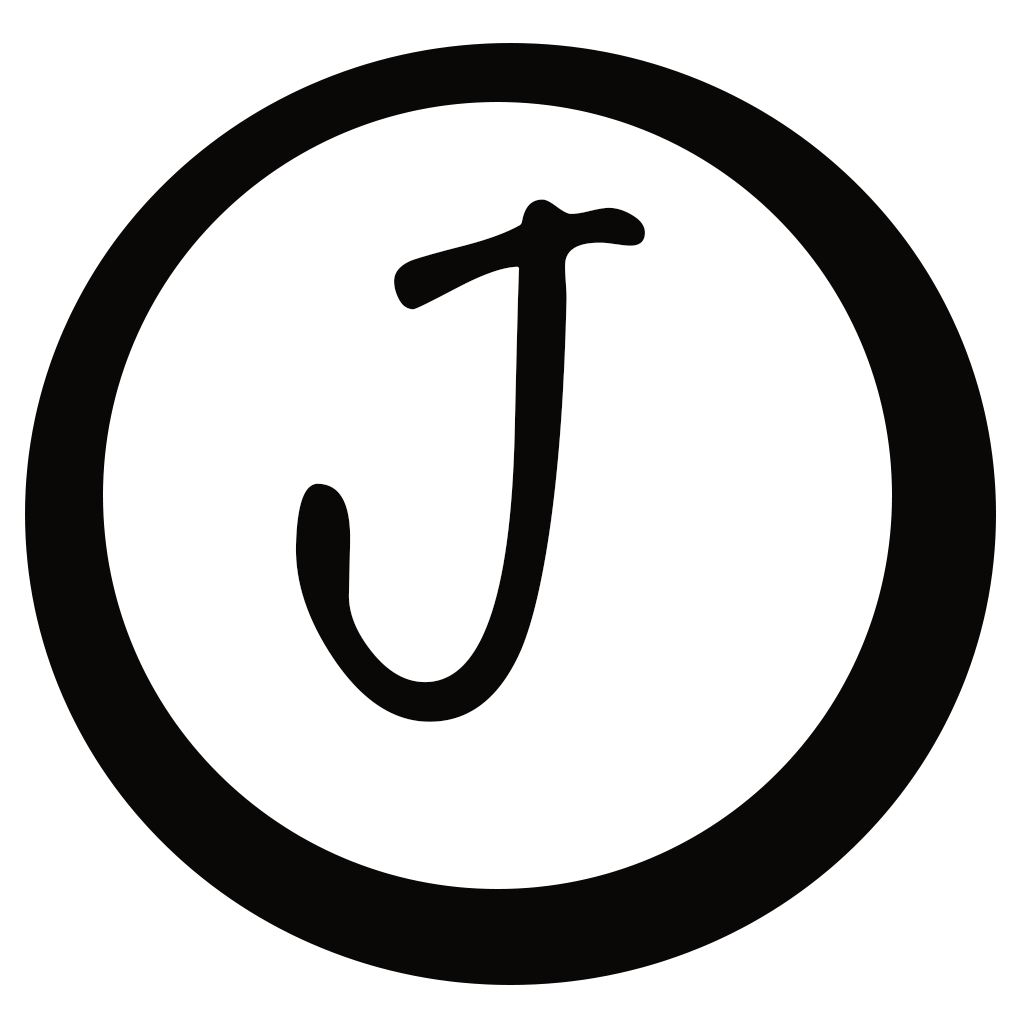
<style>
.page{position:relative;width:1024px;height:1024px;background:#ffffff}
.page>*{position:absolute;margin:0}
.t1{font:609.1px "Noteworthy-Light";color:#0a0707}
</style>
<div class="page">
<p class="t1" style="left:295px;top:199px;width:350px;height:523px;rotate:1deg">J</p>
</div>
